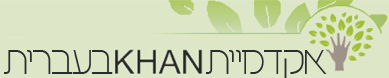
<style>
.page{position:relative;width:389px;height:78px;background:#dde6c7}
.page>*{position:absolute;margin:0}
.t1{font:33.7px "BNBarak";letter-spacing:-0.06em;color:#2c2c2c}
</style>
<div class="page">
<p class="t1" style="left:4px;top:50px;width:109px;height:24px">תירבעב</p>
<p class="t1" style="left:206px;top:50px;width:121px;height:28px">תיימדקא</p>
</div>
